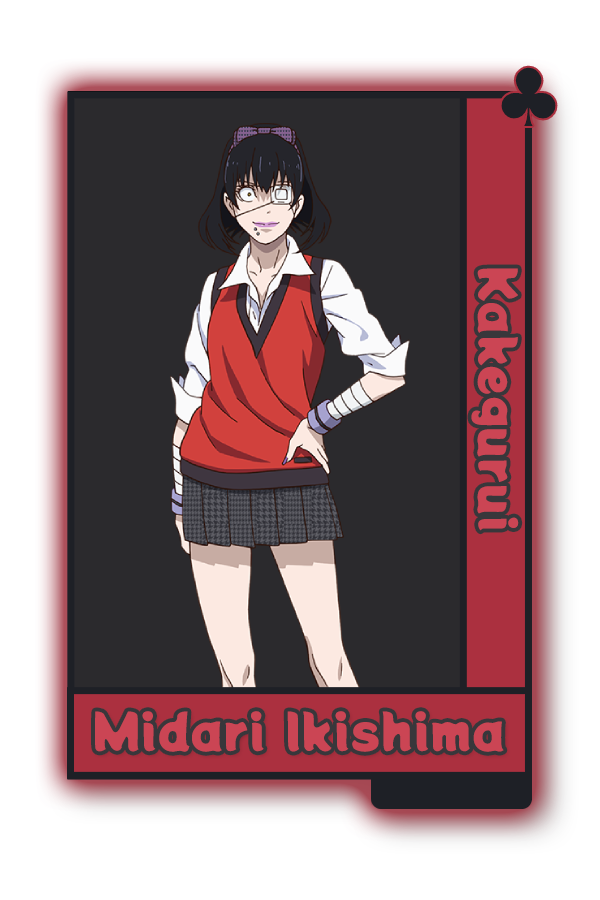
<style>
.page{position:relative;width:600px;height:900px;background:#2b2a2d}
.page>*{position:absolute;margin:0}
.t1{font:80px "DejaVuSans";color:#1e2026}
.t2{font:50px "PottaOne-Regular";color:#cb4554}
</style>
<div class="page">
<p class="t1" style="left:501px;top:67px;width:55px;height:59px">♣️</p>
<p class="t2" style="left:471px;top:268px;width:48px;height:263px;rotate:90deg">Kakegurui</p>
<p class="t2" style="left:95px;top:711px;width:409px;height:41px">Midari Ikishima</p>
</div>
